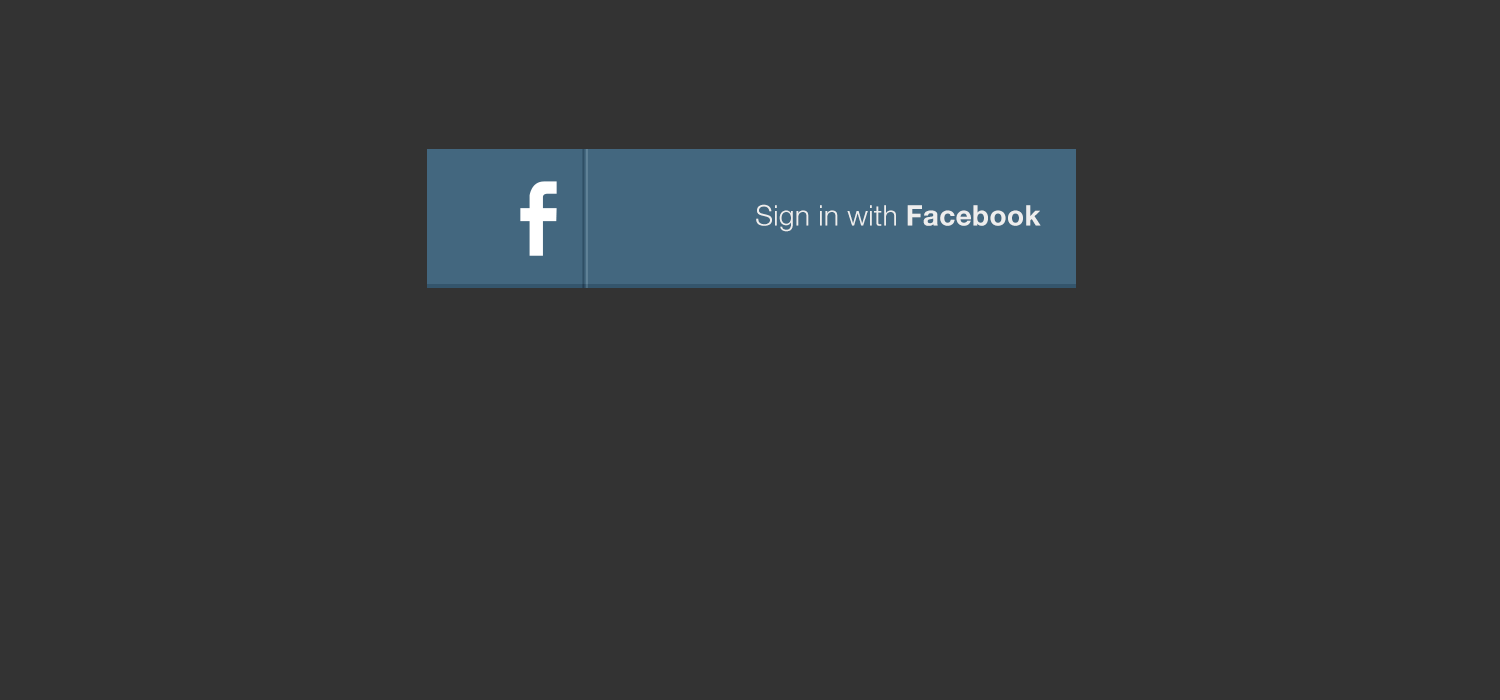
<style>
.page{position:relative;width:1500px;height:700px;background:#333333}
.page>*{position:absolute;margin:0}
.t1{font:14.1px "HelveticaNeue-Light";letter-spacing:0.01em;color:#ededed}
.t2{font:14.1px "HelveticaNeue-Bold";letter-spacing:0.01em;color:#ededed}
</style>
<div class="page">
<p class="t1" style="left:756px;top:204px;width:285px;height:28px;text-align:right">Sign in with <span class="t2">Facebook</span></p>
</div>
